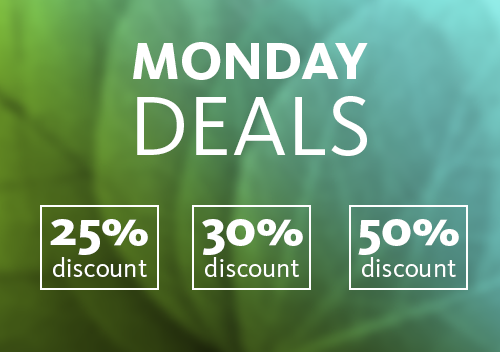
<style>
.page{position:relative;width:500px;height:352px}
.page>*{position:absolute;margin:0}
.t1{font:54.5px/76.5px "KievitOT-ExtraBold";color:#ffffff}
.t2{font:87.5px/76.5px "KievitOT-Regular";color:#ffffff}
.t3{font:26.9px "KievitOT-Regular";color:#ffffff}
.t4{font:52.4px "KievitOT-ExtraBold";color:#ffffff}
</style>
<div class="page">
<p class="t1" style="left:133px;top:42px;width:235px;height:114px;text-align:center">MONDAY<br><span class="t2">DEALS</span></p>
<p class="t3" style="left:50px;top:219px;width:98px;height:58px;text-align:center"><span class="t4">25%<br></span>discount</p>
<p class="t3" style="left:202px;top:219px;width:101px;height:58px;text-align:center"><span class="t4">30%<br></span>discount</p>
<p class="t3" style="left:358px;top:219px;width:101px;height:58px;text-align:center"><span class="t4">50%<br></span>discount</p>
</div>
